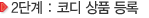
<style>
.page{position:relative;width:149px;height:18px;background:#ffffff}
.page>*{position:absolute;margin:0}
.t1{font:14.7px "YDIYGO330";letter-spacing:-0.03em;color:#373737;scale:0.92 1}
</style>
<div class="page">
<p class="t1" style="left:11px;top:1px;width:128px;height:14px">2단계 : 코디 상품 등록</p>
</div>
